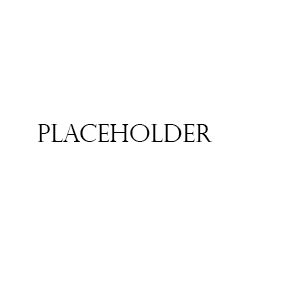
<style>
.page{position:relative;width:300px;height:300px;background:#ffffff}
.page>*{position:absolute;margin:0}
.t1{font:25px "PerpetuaTitlingMT-Light";color:#000000}
</style>
<div class="page">
<p class="t1" style="left:37px;top:124px;width:175px;height:18px">Placeholder</p>
</div>
